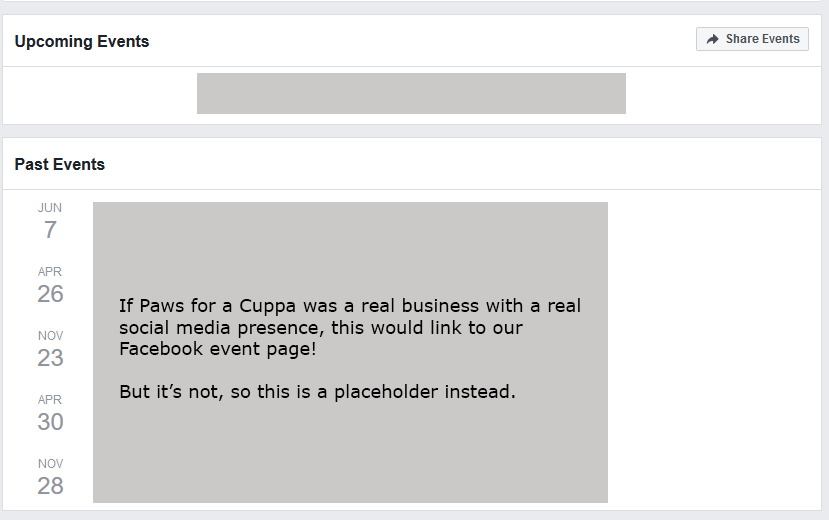
<style>
.page{position:relative;width:829px;height:520px;background:#ffffff}
.page>*{position:absolute;margin:0}
.t1{font:18px "Verdana";color:#000000}
</style>
<div class="page">
<p class="t1" style="left:119px;top:298px;width:461px;height:104px">If Paws for a Cuppa was a real business with a real <br>social media presence, this would link to our <br>Facebook event page!<br><br>But it’s not, so this is a placeholder instead.</p>
</div>
